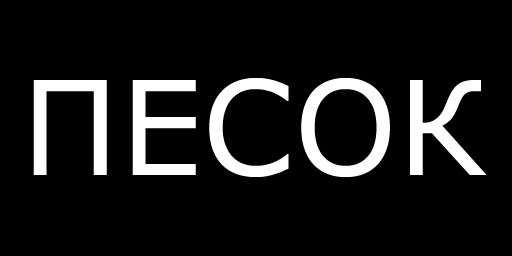
<style>
.page{position:relative;width:512px;height:256px;background:#000000}
.page>*{position:absolute;margin:0}
.t1{font:131px "Verdana";color:#ffffff}
</style>
<div class="page">
<p class="t1" style="left:33px;top:78px;width:454px;height:99px">ПЕСОК</p>
</div>
